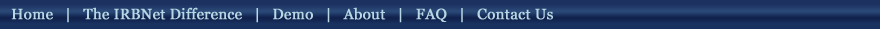
<style>
.page{position:relative;width:880px;height:29px;background:#19315e}
.page>*{position:absolute;margin:0}
.t1{font:14.8px "Georgia";letter-spacing:0.005em;color:#b7d7e4;font-weight:bold}
</style>
<div class="page">
<p class="t1" style="left:11px;top:7px;width:542px;height:16px">Home   |   The IRBNet Difference   |   Demo   |   About   |   FAQ   |   Contact Us</p>
</div>
